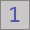
<style>
.page{position:relative;width:30px;height:30px;background:#c9c7c7}
.page>*{position:absolute;margin:0}
.t1{font:20.8px "Menlo-Regular";color:#5559a7}
</style>
<div class="page">
<p class="t1" style="left:10px;top:7px;width:10px;height:15px">1</p>
</div>
